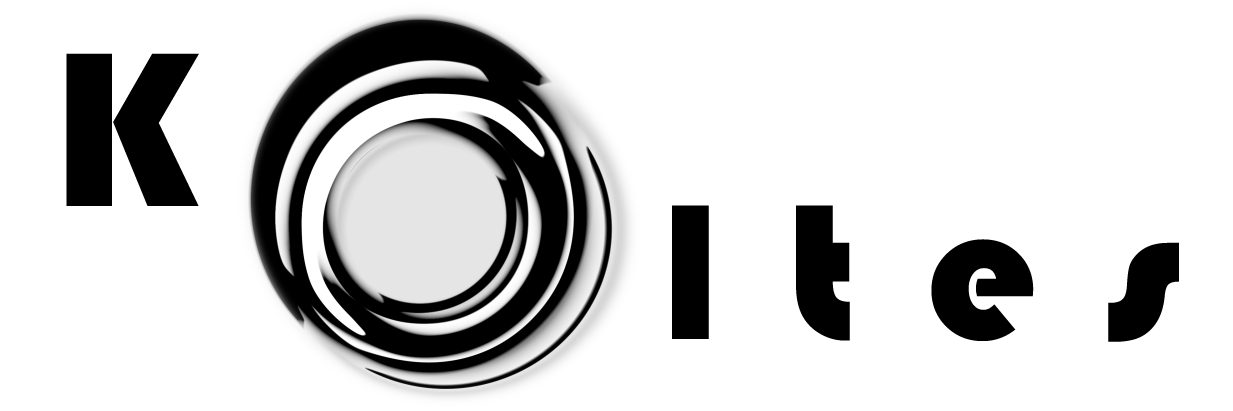
<style>
.page{position:relative;width:1233px;height:411px;background:#ffffff}
.page>*{position:absolute;margin:0}
.t1{font:228px "Bauhaus93";letter-spacing:0.35em;color:#000000}
.t2{font:200px "Bauhaus93";letter-spacing:0.35em;color:#000000}
</style>
<div class="page">
<p class="t1" style="left:66px;top:53px;width:133px;height:153px">K</p>
<p class="t2" style="left:672px;top:205px;width:507px;height:137px">ltes</p>
</div>
